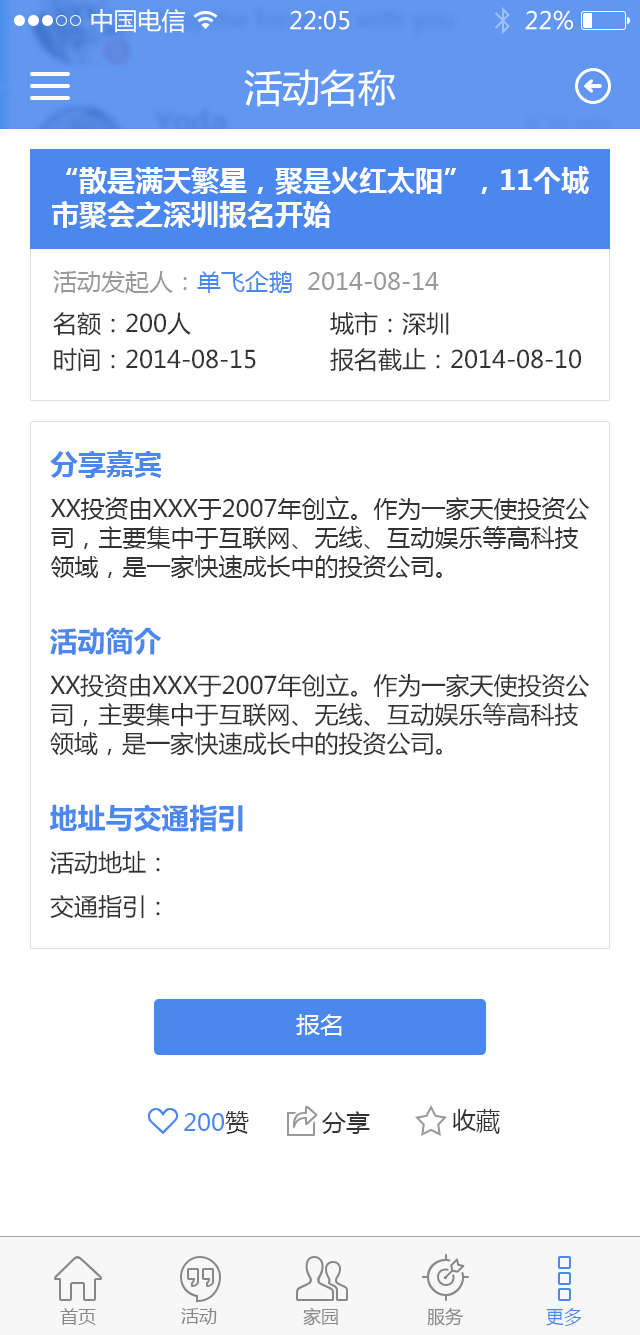
<style>
.page{position:relative;width:640px;height:1335px;background:#ffffff}
.page>*{position:absolute;margin:0}
.t1{font:24px "MicrosoftYaHei";color:#ffffff}
.t2{font:38px "MicrosoftYaHei";color:#ffffff}
.t3{font:28px "MicrosoftYaHei-Bold";color:#fefefe}
.t4{font:24px "MicrosoftYaHei";color:#999999}
.t5{font:24px "MicrosoftYaHei";color:#4a87ee}
.t6{font:24px/36.1px "MicrosoftYaHei";color:#333333}
.t7{font:28px "MicrosoftYaHei-Bold";color:#4a87ee}
.t8{font:24px "MicrosoftYaHei";color:#333333}
.t9{font:28.1px "MicrosoftYaHei-Bold";color:#4a87ee}
.t10{font:24.1px "MicrosoftYaHei";color:#333333}
.t11{font:18px "MicrosoftYaHei";color:#888888}
.t12{font:18px "MicrosoftYaHei";color:#4a87ee}
</style>
<div class="page">
<p class="t1" style="left:91px;top:9px;width:94px;height:24px">中国电信</p>
<p class="t1" style="left:290px;top:10px;width:60px;height:20px">22:05</p>
<p class="t1" style="left:525px;top:10px;width:48px;height:20px">22%</p>
<p class="t2" style="left:244px;top:69px;width:152px;height:38px">活动名称</p>
<p class="t3" style="left:52px;top:166px;width:537px;height:63px">“散是满天繁星，聚是火红太阳”，11个城<br>市聚会之深圳报名开始</p>
<p class="t4" style="left:53px;top:270px;width:386px;height:24px">活动发起人：<span class="t5">单飞企鹅</span>  2014-08-14</p>
<p class="t6" style="left:53px;top:312px;width:203px;height:59px">名额：200人<br>时间：2014-08-15</p>
<p class="t6" style="left:330px;top:311px;width:251px;height:61px">城市：深圳<br>报名截止：2014-08-10</p>
<p class="t7" style="left:50px;top:450px;width:112px;height:28px">分享嘉宾</p>
<p class="t8" style="left:50px;top:496px;width:540px;height:82px">XX投资由XXX于2007年创立。作为一家天使投资公司，主要集中于互联网、无线、互动娱乐等高科技领域，是一家快速成长中的投资公司。</p>
<p class="t7" style="left:50px;top:627px;width:112px;height:28px">活动简介</p>
<p class="t8" style="left:50px;top:673px;width:539px;height:83px">XX投资由XXX于2007年创立。作为一家天使投资公司，主要集中于互联网、无线、互动娱乐等高科技领域，是一家快速成长中的投资公司。</p>
<p class="t9" style="left:50px;top:804px;width:193px;height:28px">地址与交通指引</p>
<p class="t10" style="left:50px;top:851px;width:110px;height:68px">活动地址：<br>交通指引：</p>
<p class="t1" style="left:296px;top:1014px;width:46px;height:22px">报名</p>
<p class="t8" style="left:453px;top:1109px;width:47px;height:25px">收藏</p>
<p class="t5" style="left:184px;top:1111px;width:65px;height:23px">200<span class="t8">赞</span></p>
<p class="t8" style="left:322px;top:1111px;width:48px;height:23px">分享</p>
<p class="t11" style="left:60px;top:1308px;width:36px;height:17px">首页</p>
<p class="t11" style="left:181px;top:1308px;width:36px;height:17px">活动</p>
<p class="t11" style="left:303px;top:1307px;width:35px;height:19px">家园</p>
<p class="t11" style="left:427px;top:1307px;width:36px;height:19px">服务</p>
<p class="t12" style="left:546px;top:1308px;width:35px;height:18px">更多</p>
</div>
